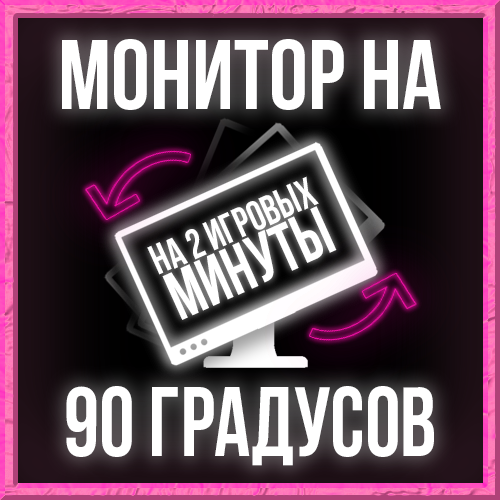
<style>
.page{position:relative;width:500px;height:500px}
.page>*{position:absolute;margin:0}
.t1{font:98px "BebasNeueBold";color:#ffffff}
.t2{font:41.9px/50.5px "BebasNeueBold";color:#ffffff;scale:0.93 1}
.t3{font:68.4px/50.5px "BebasNeueBold";color:#ffffff;scale:0.93 1}
.t4{font:98px "BebasNeueBold";color:#ffffff;scale:0.91 1}
</style>
<div class="page">
<p class="t1" style="left:62px;top:39px;width:379px;height:71px">монитор на</p>
<p class="t2" style="left:147px;top:176px;width:190px;height:144px;text-align:center;rotate:-24deg">на 2 игровых<br><span class="t3">минуты</span></p>
<p class="t4" style="left:66px;top:386px;width:368px;height:80px">90 градусов</p>
</div>
